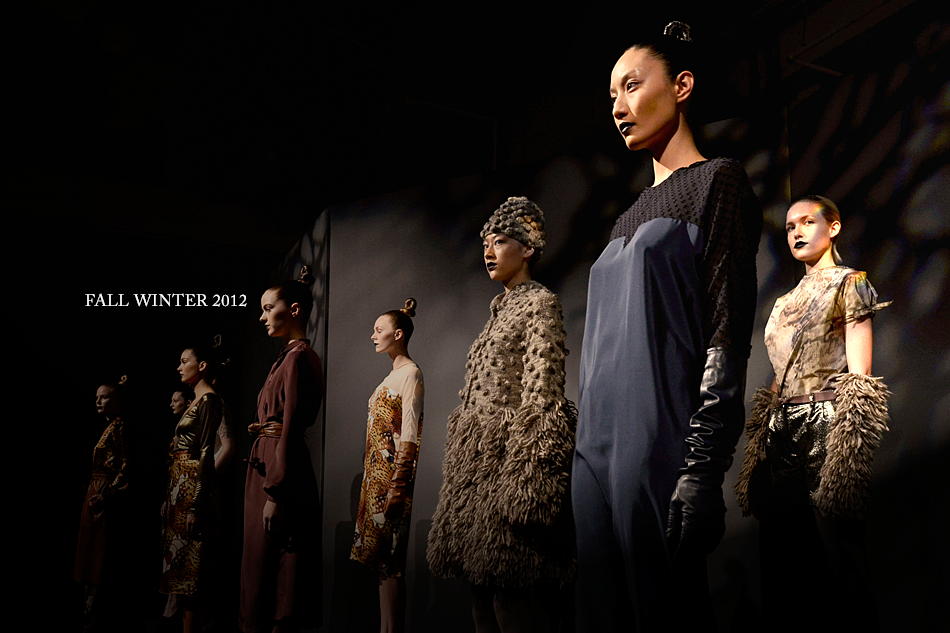
<style>
.page{position:relative;width:950px;height:633px}
.page>*{position:absolute;margin:0}
.t1{font:16.7px "ACaslonPro-Regular";letter-spacing:0.025em;color:#ffffff}
</style>
<div class="page">
<p class="t1" style="left:85px;top:293px;width:162px;height:14px">FALL WINTER 2012</p>
</div>
